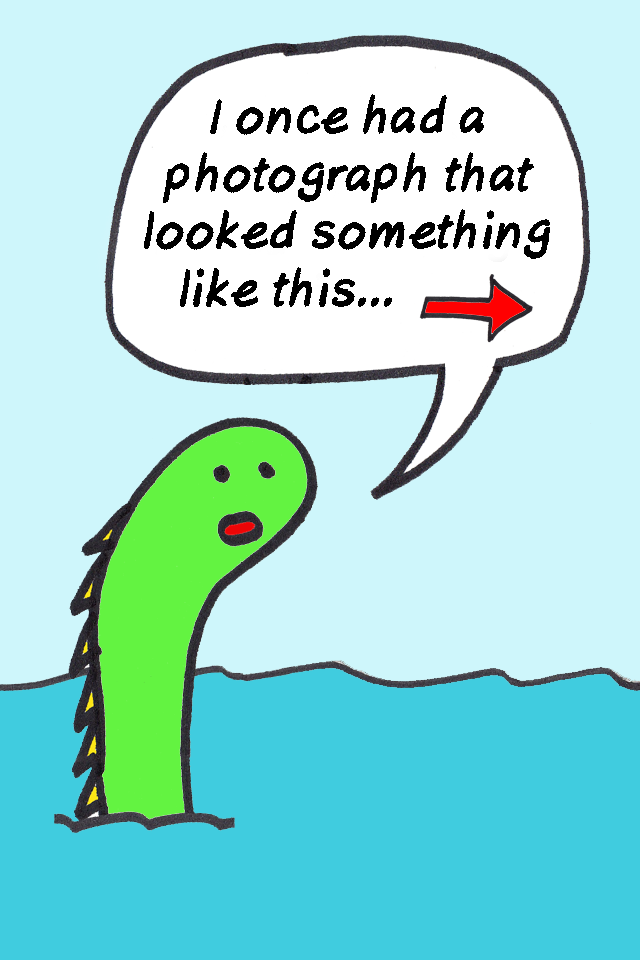
<style>
.page{position:relative;width:640px;height:960px;background:#cef6fb}
.page>*{position:absolute;margin:0}
.t1{font:48px "AxureHandwriting-BoldItalic";color:#000000}
</style>
<div class="page">
<p class="t1" style="left:144px;top:94px;width:406px;height:213px;text-align:center">I once had a<br>photograph that<br>looked something<br>like this...</p>
</div>
